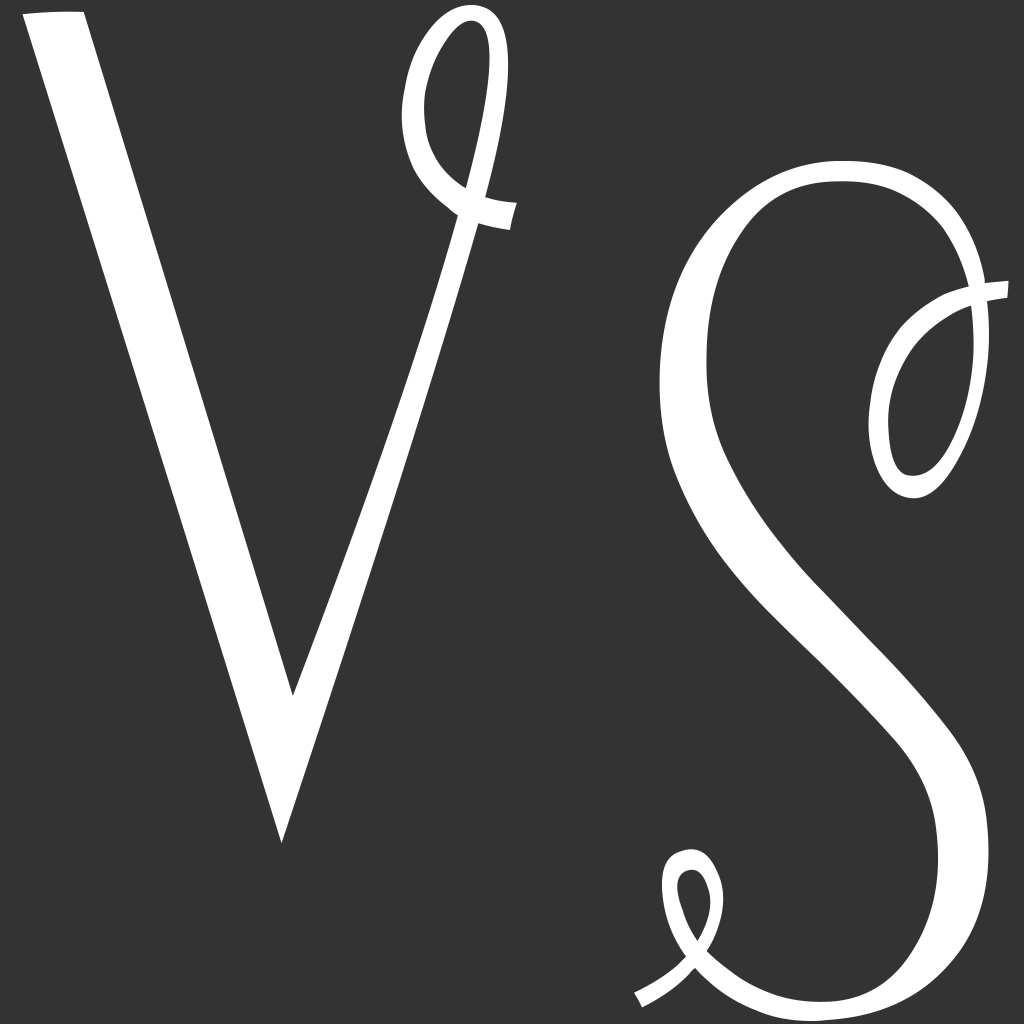
<style>
.page{position:relative;width:1024px;height:1024px;background:#333333}
.page>*{position:absolute;margin:0}
.t1{font:1158.3px "Strawberry_Whipped_Cream";color:#ffffff}
</style>
<div class="page">
<p class="t1" style="left:22px;top:5px;width:495px;height:838px">V</p>
<p class="t1" style="left:634px;top:161px;width:375px;height:860px">S</p>
</div>
